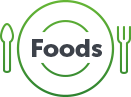
<style>
.page{position:relative;width:131px;height:97px;background:#ffffff}
.page>*{position:absolute;margin:0}
.t1{font:25px "MuseoSansCyrl-900";color:#3d424a}
</style>
<div class="page">
<p class="t1" style="left:32px;top:39px;width:70px;height:18px">Foods</p>
</div>
